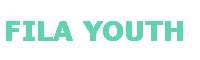
<style>
.page{position:relative;width:200px;height:60px;background:#ffffff}
.page>*{position:absolute;margin:0}
.t1{font:25px "Verdana-Bold";color:#61d2b4;font-weight:bold}
</style>
<div class="page">
<p class="t1" style="left:6px;top:21px;width:177px;height:20px">FILA YOUTH</p>
</div>
